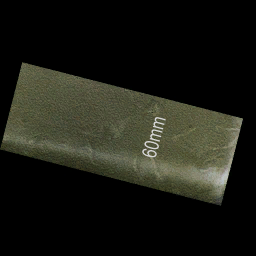
<style>
.page{position:relative;width:256px;height:256px;background:#000000}
.page>*{position:absolute;margin:0}
.t1{font:20.1px "ArialMT";color:#d5d5d5;scale:0.76 1}
</style>
<div class="page">
<p class="t1" style="left:142px;top:117px;width:24px;height:41px;rotate:-75deg">60mm</p>
</div>
